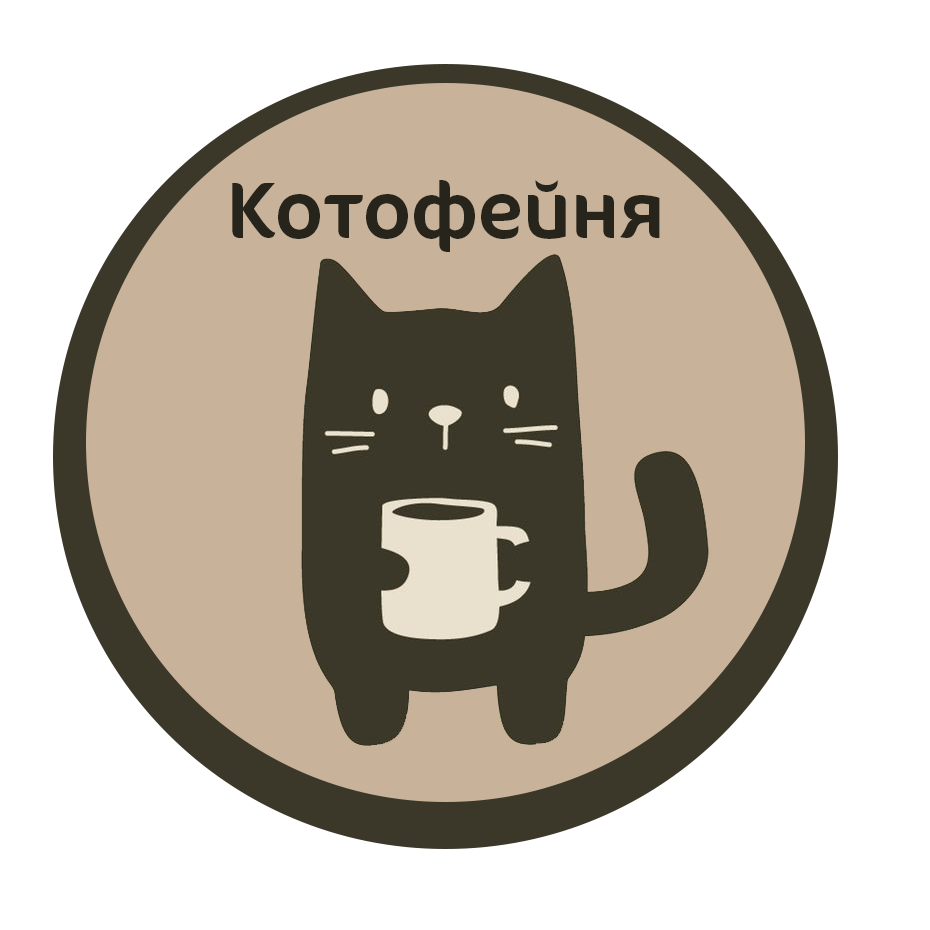
<style>
.page{position:relative;width:930px;height:930px;background:#ffffff}
.page>*{position:absolute;margin:0}
.t1{font:80px "Cocon-Regular";color:#26241b}
</style>
<div class="page">
<p class="t1" style="left:232px;top:180px;width:428px;height:72px">Котофейня</p>
</div>
